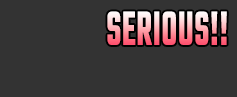
<style>
.page{position:relative;width:237px;height:97px;background:#333333}
.page>*{position:absolute;margin:0}
.t1{font:51.9px "Teko-Semibold";font-weight:bold;scale:0.64 1}
</style>
<div class="page">
<p class="t1" style="left:107px;top:11px;width:120px;height:34px">SERIOUS!!</p>
</div>
